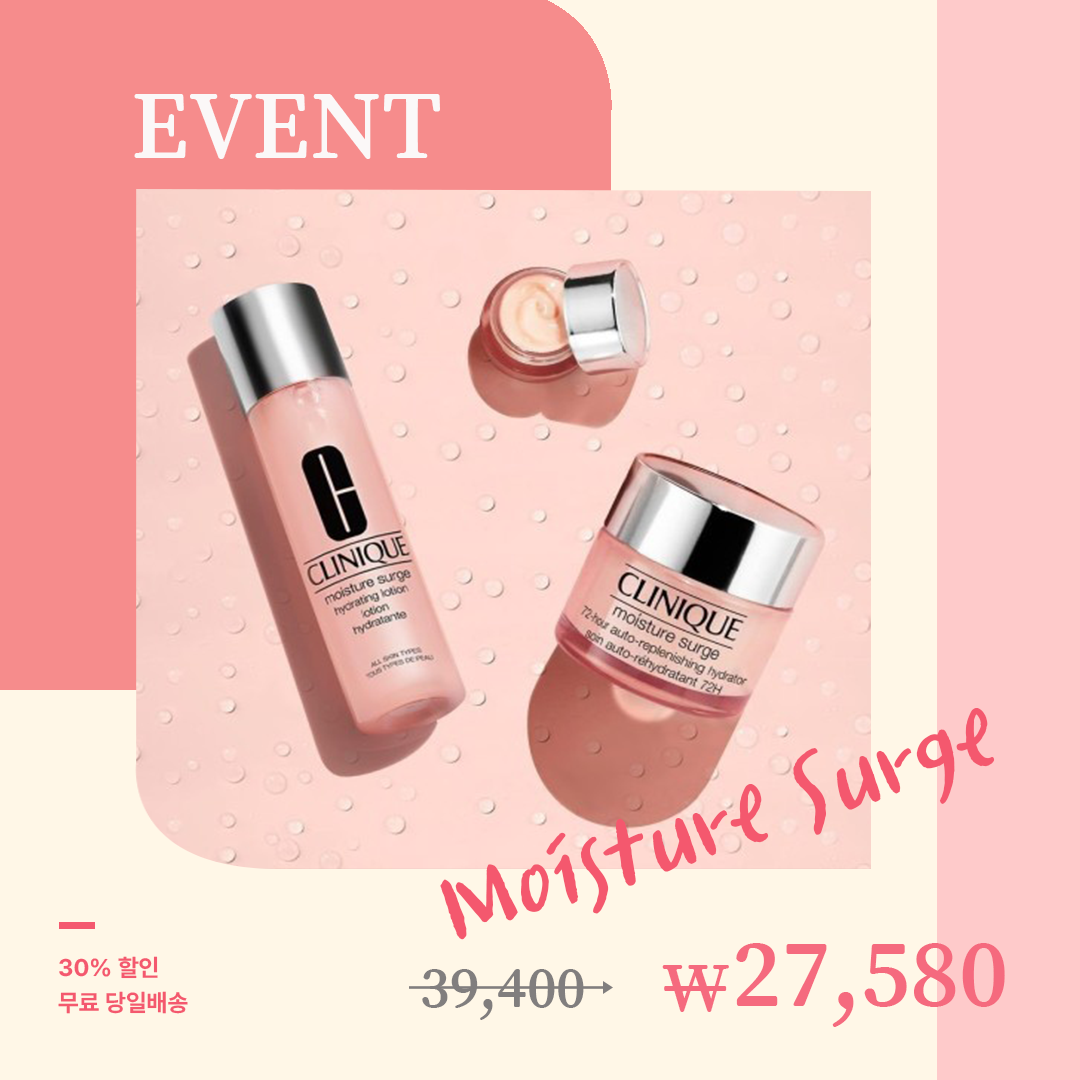
<style>
.page{position:relative;width:1080px;height:1080px;background:#fff7e7}
.page>*{position:absolute;margin:0}
.t1{font:100px "SongMyung-Regular";color:#fbf8f8}
.t2{font:119px "tvNEnjoystoriesB";color:#f4586e}
.t3{font:100px "SongMyung-Regular";color:#f56a7e}
.t4{font:24px/35px "PretendardVariable-Bold";color:#f4586e}
.t5{font:72px "SongMyung-Regular";color:#f56a7e}
.t6{font:60px "SongMyung-Regular";color:#817e7e}
</style>
<div class="page">
<p class="t1" style="left:134px;top:94px;width:306px;height:65px">EVENT</p>
<p class="t2" style="left:440px;top:708px;width:555px;height:232px;rotate:-19deg">Moisture Surge</p>
<p class="t3" style="left:736px;top:943px;width:269px;height:84px">27,580</p>
<p class="t4" style="left:58px;top:956px;width:130px;height:58px">30% 할인<br>무료 당일배송</p>
<p class="t5" style="left:662px;top:965px;width:67px;height:47px">₩</p>
<p class="t6" style="left:422px;top:969px;width:162px;height:51px">39,400</p>
</div>
